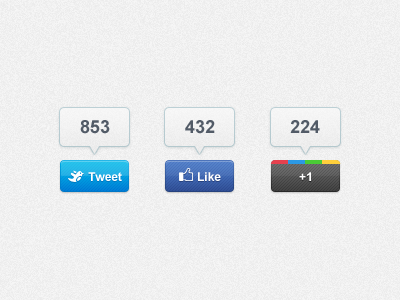
<style>
.page{position:relative;width:400px;height:300px}
.page>*{position:absolute;margin:0}
.t1{font:18px "Arial-BoldMT";color:#525b67}
.t2{font:12px "Arial-BoldMT";color:#ffffff}
</style>
<div class="page">
<p class="t1" style="left:80px;top:120px;width:30px;height:14px">853</p>
<p class="t1" style="left:185px;top:120px;width:30px;height:14px">432</p>
<p class="t1" style="left:290px;top:120px;width:30px;height:13px">224</p>
<p class="t2" style="left:88px;top:172px;width:34px;height:9px">Tweet</p>
<p class="t2" style="left:198px;top:172px;width:23px;height:9px">Like</p>
<p class="t2" style="left:299px;top:172px;width:12px;height:9px">+1</p>
</div>
